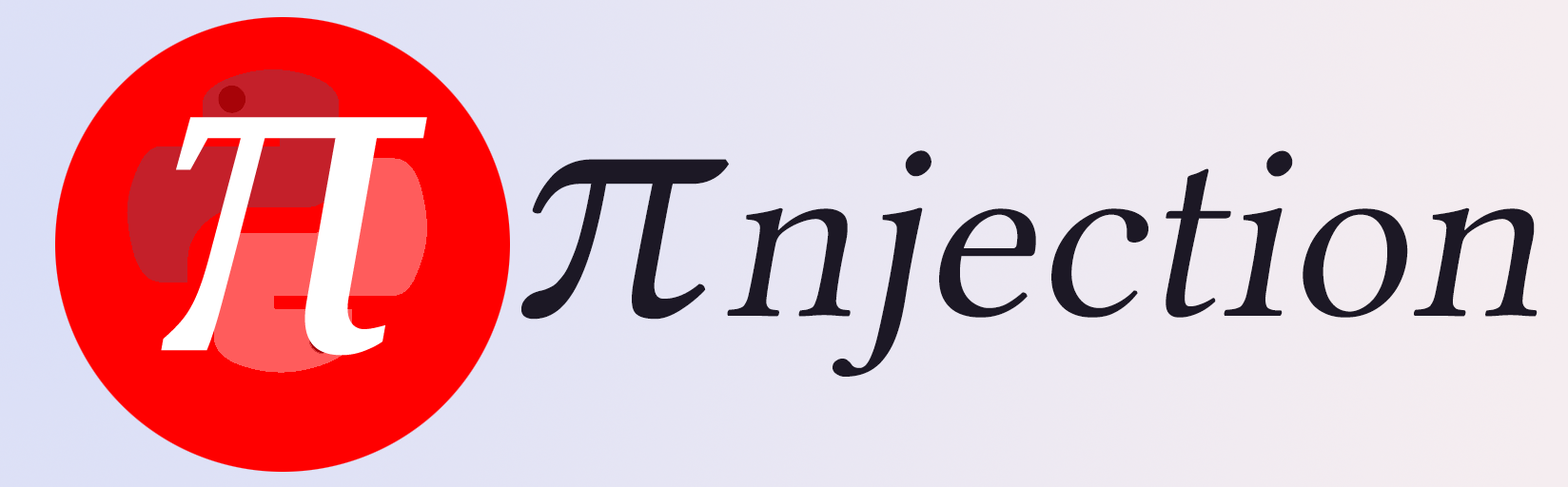
<style>
.page{position:relative;width:1568px;height:487px}
.page>*{position:absolute;margin:0}
.t1{font:253.7px "LinuxLibertineDG";color:#1c1825;font-style:italic}
.t2{font:380.6px "LinuxLibertineDG";color:#1c1825;font-style:italic}
</style>
<div class="page">
<p class="t1" style="left:521px;top:150px;width:1017px;height:227px"><span class="t2">π</span>njection</p>
</div>
